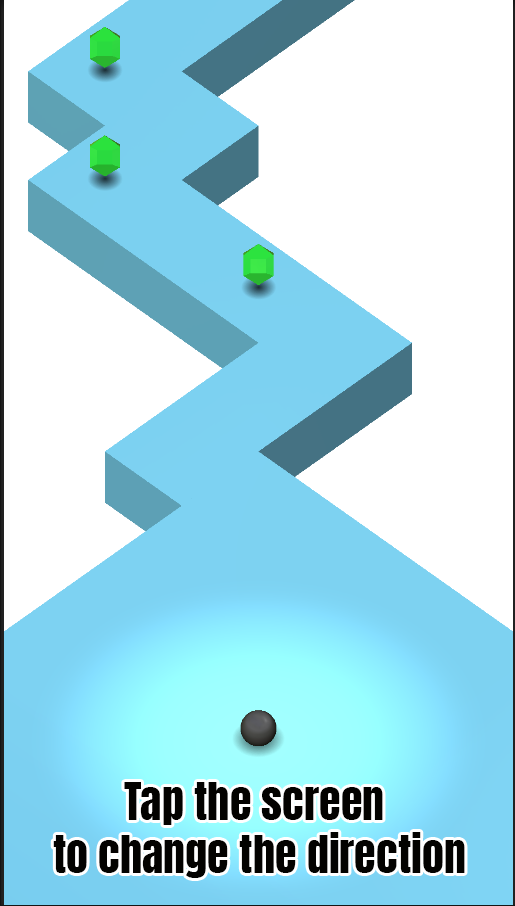
<style>
.page{position:relative;width:515px;height:906px;background:#ffffff}
.page>*{position:absolute;margin:0}
.t1{font:44px "Anton-Regular";color:#030200}
</style>
<div class="page">
<p class="t1" style="left:53px;top:782px;width:412px;height:96px;text-align:center">Tap the screen <br>to change the direction</p>
</div>
